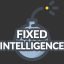
<style>
.page{position:relative;width:64px;height:64px;background:#333333}
.page>*{position:absolute;margin:0}
.t1{font:9.3px "Lato-Bold";color:#ffffff}
.t2{font:10.7px "Lato-Bold";color:#ffffff}
</style>
<div class="page">
<p class="t1" style="left:0px;top:30px;width:64px;height:20px;text-align:center"><span class="t2">FIXED<br></span>INTELLIGENCE</p>
</div>
